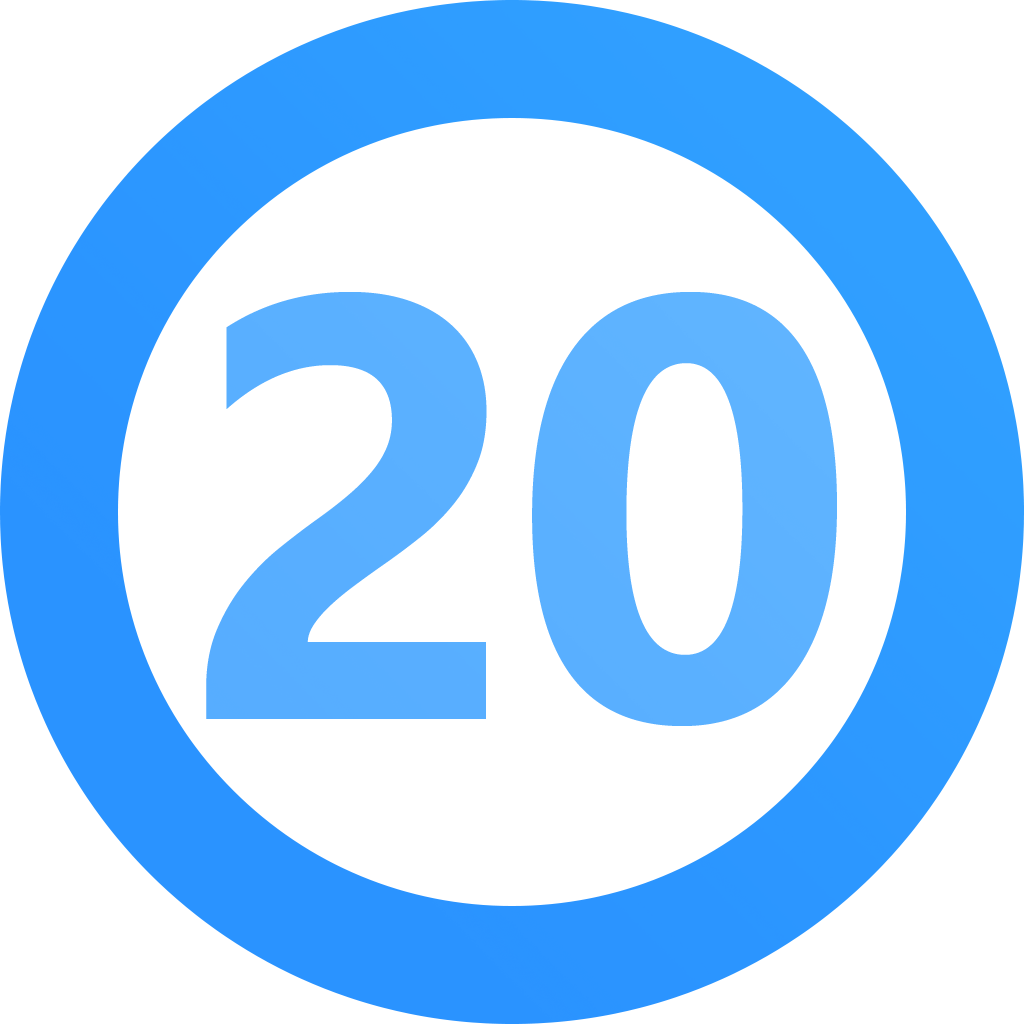
<style>
.page{position:relative;width:1024px;height:1024px;background:#ffffff}
.page>*{position:absolute;margin:0}
.t1{font:600px "SegoeUI-Bold";letter-spacing:-0.025em;color:#62b6ff}
</style>
<div class="page">
<p class="t1" style="left:206px;top:292px;width:631px;height:434px">20</p>
</div>
